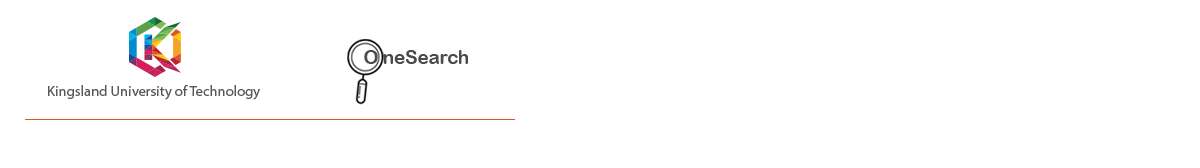
<style>
.page{position:relative;width:1200px;height:168px;background:#ffffff}
.page>*{position:absolute;margin:0}
.t1{font:18.6px "ArialRoundedMTBold";color:#4d4b4a}
.t2{font:14.6px "MyriadPro-Regular";color:#575757}
</style>
<div class="page">
<p class="t1" style="left:364px;top:50px;width:104px;height:14px">O neSearch</p>
<p class="t2" style="left:48px;top:85px;width:212px;height:15px">Kingsland University of Technology</p>
</div>
